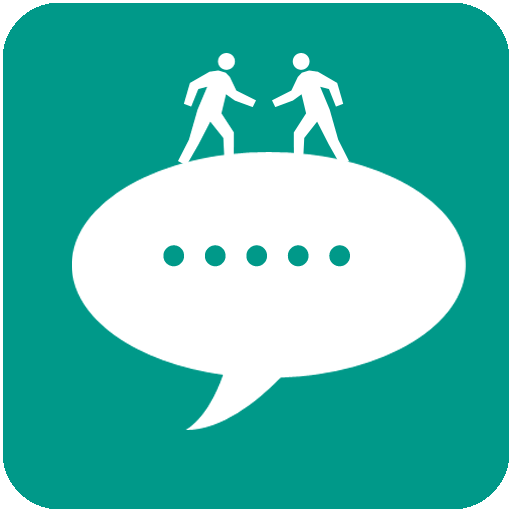
<style>
.page{position:relative;width:512px;height:512px;background:#009989}
.page>*{position:absolute;margin:0}
.t1{font:180px "MicrosoftJhengHeiRegular";color:#009989}
</style>
<div class="page">
<p class="t1" style="left:163px;top:245px;width:187px;height:22px">.....</p>
</div>
